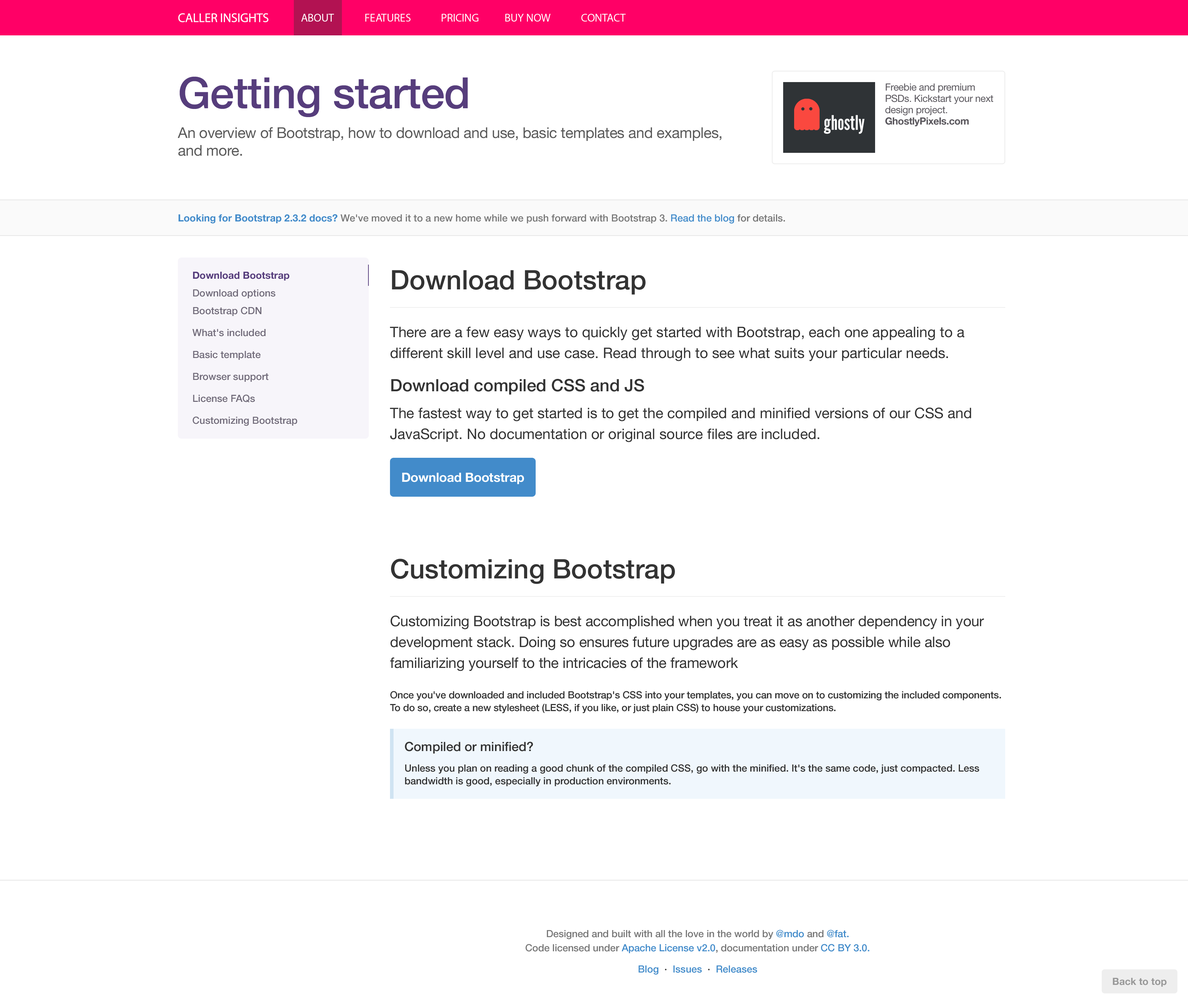
<style>
.page{position:relative;width:1188px;height:1004px;background:#ffffff}
.page>*{position:absolute;margin:0}
.t1{font:12.7px "MyriadPro-Regular";letter-spacing:-0.01em;color:#ffffff}
.t2{font:11.3px "MyriadPro-Regular";letter-spacing:-0.01em;color:#ffffff}
.t3{font:14.9px "HelveticaNeue";letter-spacing:-0.015em;color:#5a5a5a}
.t4{font:43.1px "HelveticaNeue-Medium";letter-spacing:-0.01em;color:#563d7c}
.t5{font:9.9px/11.3px "HelveticaNeue";letter-spacing:-0.02em;color:#5a575d}
.t6{font:9.9px/11.3px "HelveticaNeue-Bold";letter-spacing:-0.02em;color:#5a575d}
.t7{font:20.1px "LeagueGothic";color:#ffffff}
.t8{font:9.9px "HelveticaNeue-Medium";color:#777777}
.t9{font:9.9px "HelveticaNeue-Bold";color:#428bca}
.t10{font:9.9px "HelveticaNeue-Medium";color:#428bca}
.t11{font:14.5px/20.9px "HelveticaNeue";color:#333333}
.t12{font:26.9px/17.7px "HelveticaNeue-Medium";color:#333333}
.t13{font:17px/33.2px "HelveticaNeue-Medium";color:#333333}
.t14{font:17px/20.9px "HelveticaNeue-Medium";color:#333333}
.t15{font:9.9px/21.9px "HelveticaNeue-Medium";color:#716b7a}
.t16{font:9.9px/17.7px "HelveticaNeue-Bold";color:#563d7c}
.t17{font:9.9px/17.7px "HelveticaNeue-Medium";color:#716b7a}
.t18{font:12.7px "HelveticaNeue-Bold";letter-spacing:-0.01em;color:#ffffff}
.t19{font:14.5px/20.9px "HelveticaNeue";letter-spacing:-0.01em;color:#333333}
.t20{font:9.9px/12.7px "HelveticaNeue-Medium";letter-spacing:-0.01em;color:#333333}
.t21{font:9.9px/12.7px "HelveticaNeue-Medium";color:#333333}
.t22{font:12.7px/12.7px "HelveticaNeue-Medium";color:#333333}
.t23{font:7.8px/7.8px "HelveticaNeue-Medium";color:#333333}
.t24{font:9.9px/14.1px "HelveticaNeue-Medium";letter-spacing:-0.005em;color:#777777}
.t25{font:9.9px/14.1px "HelveticaNeue-Medium";letter-spacing:-0.005em;color:#428bca}
.t26{font:9.9px/21.2px "HelveticaNeue-Medium";color:#428bca}
.t27{font:9.9px/21.2px "HelveticaNeue-Medium";color:#333333}
.t28{font:9.9px "HelveticaNeue-Bold";color:#999999}
</style>
<div class="page">
<p class="t1" style="left:178px;top:13px;width:90px;height:9px">CALLER INSIGHTS</p>
<p class="t2" style="left:301px;top:14px;width:325px;height:8px">ABOUT   FEATURES   PRICING   BUY NOW   CONTACT</p>
<p class="t3" style="left:178px;top:76px;width:544px;height:80px"><span class="t4">Getting started<br><br></span>An overview of Bootstrap, how to download and use, basic templates and examples, and more.</p>
<p class="t5" style="left:885px;top:83px;width:108px;height:43px">Freebie and premium PSDs. Kickstart your next design project.<br><span class="t6">GhostlyPixels.com</span></p>
<p class="t7" style="left:824px;top:115px;width:41px;height:19px">ghostly</p>
<p class="t8" style="left:179px;top:214px;width:606px;height:9px"><span class="t9">Looking for Bootstrap 2.3.2 docs?</span> We've moved it to a new home while we push forward with Bootstrap 3. <span class="t10">Read the blog</span> for details.</p>
<p class="t11" style="left:390px;top:270px;width:581px;height:172px"><span class="t12">Download Bootstrap<br><br></span>There are a few easy ways to quickly get started with Bootstrap, each one appealing to a different skill level and use case. Read through to see what suits your particular needs.<br><span class="t13">Download compiled CSS and JS</span><span class="t14"><br><br></span>The fastest way to get started is to get the compiled and minified versions of our CSS and JavaScript. No documentation or original source files are included.</p>
<p class="t15" style="left:192px;top:272px;width:105px;height:154px"><span class="t16">Download Bootstrap<br></span><span class="t17">Download options<br>Bootstrap CDN<br></span>What's included<br>Basic template<br>Browser support<br>License FAQs<br>Customizing Bootstrap</p>
<p class="t18" style="left:402px;top:472px;width:122px;height:12px">Download Bootstrap</p>
<p class="t19" style="left:390px;top:558px;width:611px;height:155px"><span class="t12">Customizing Bootstrap<br><br></span>Customizing Bootstrap is best accomplished when you treat it as another dependency in your development stack. Doing so ensures future upgrades are as easy as possible while also familiarizing yourself to the intricacies of the framework<br><br><br><br><span class="t20">Once you've downloaded and included Bootstrap's CSS into your templates, you can move on to customizing the included components. To do so, create a new stylesheet (LESS, if you like, or just plain CSS) to house your customizations.</span></p>
<p class="t21" style="left:405px;top:741px;width:575px;height:45px"><span class="t22">Compiled or minified?<br></span><span class="t23"><br></span>Unless you plan on reading a good chunk of the compiled CSS, go with the minified. It's the same code, just compacted. Less bandwidth is good, especially in production environments.</p>
<p class="t24" style="left:525px;top:929px;width:345px;height:45px;text-align:center">Designed and built with all the love in the world by <span class="t25">@mdo</span> and <span class="t25">@fat.<br></span>Code licensed under <span class="t25">Apache License v2.0</span>, documentation under <span class="t25">CC BY 3.0.<br></span><span class="t26">Blog  </span><span class="t27">· </span><span class="t26"> Issues  </span><span class="t27">·</span><span class="t26">  Releases</span></p>
<p class="t28" style="left:1113px;top:977px;width:54px;height:9px">Back to top</p>
</div>
